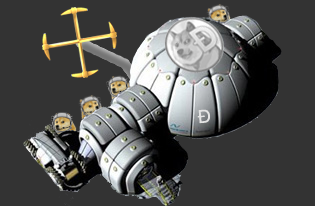
<style>
.page{position:relative;width:315px;height:206px;background:#333333}
.page>*{position:absolute;margin:0}
.t1{font:18px "ArialMT";color:#e4e4e4}
</style>
<div class="page">
<p class="t1" style="left:197px;top:109px;width:13px;height:15px;rotate:-4deg">Ð</p>
</div>
